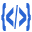
<style>
.page{position:relative;width:32px;height:32px;background:#ffffff}
.page>*{position:absolute;margin:0}
.t1{font:30.1px "Arial-Black";color:#2965d3;scale:0.4 1}
.t2{font:33px "Arial-Black";color:#2965d3;scale:0.4 1}
</style>
<div class="page">
<p class="t1" style="left:1px;top:3px;width:30px;height:28px">{     }</p>
<p class="t2" style="left:6px;top:5px;width:21px;height:24px">&lt;/&gt;</p>
</div>
